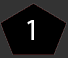
<style>
.page{position:relative;width:68px;height:58px;background:#000000}
.page>*{position:absolute;margin:0}
.t1{font:30px "MyriadPro-Regular";color:#ffffff}
</style>
<div class="page">
<p class="t1" style="left:27px;top:20px;width:7px;height:20px">1</p>
</div>
